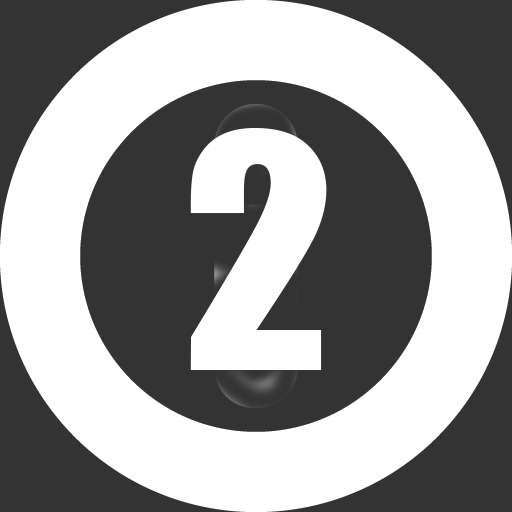
<style>
.page{position:relative;width:512px;height:512px;background:#ffffff}
.page>*{position:absolute;margin:0}
.t1{font:300px "Impact";color:#ffffff}
</style>
<div class="page">
<p class="t1" style="left:190px;top:128px;width:137px;height:242px">2</p>
</div>
